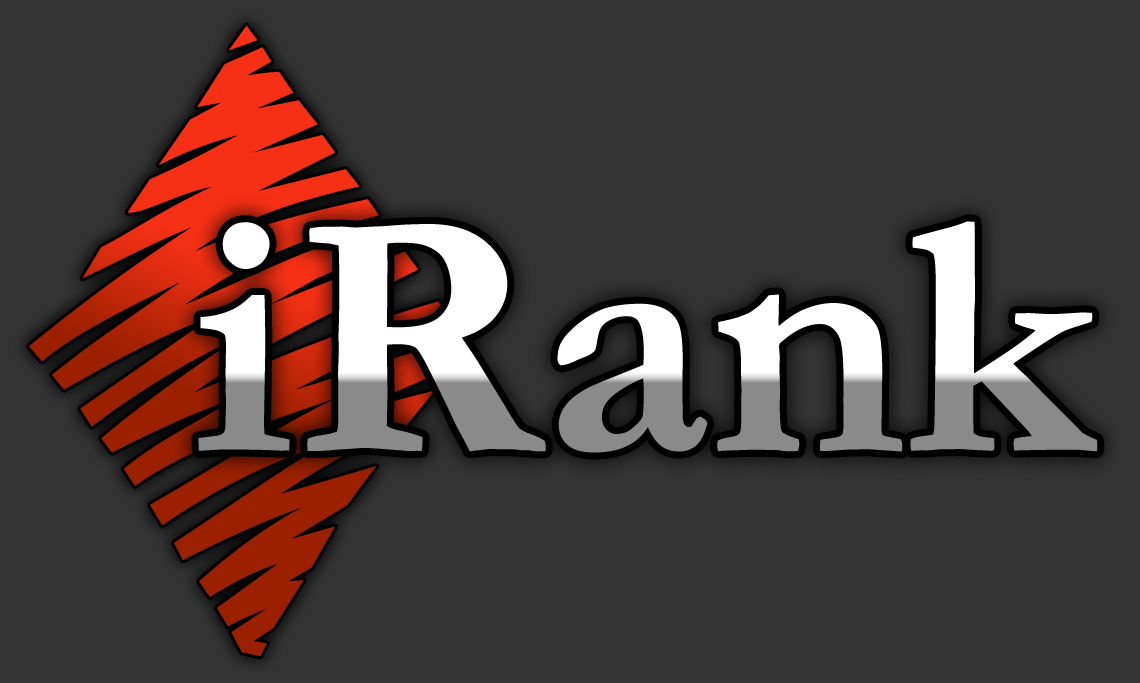
<style>
.page{position:relative;width:1140px;height:683px;background:#333333}
.page>*{position:absolute;margin:0}
.t1{font:353.2px "Garamond-Bold";letter-spacing:-0.025em;font-weight:bold}
</style>
<div class="page">
<p class="t1" style="left:198px;top:221px;width:900px;height:232px">iRank</p>
</div>
